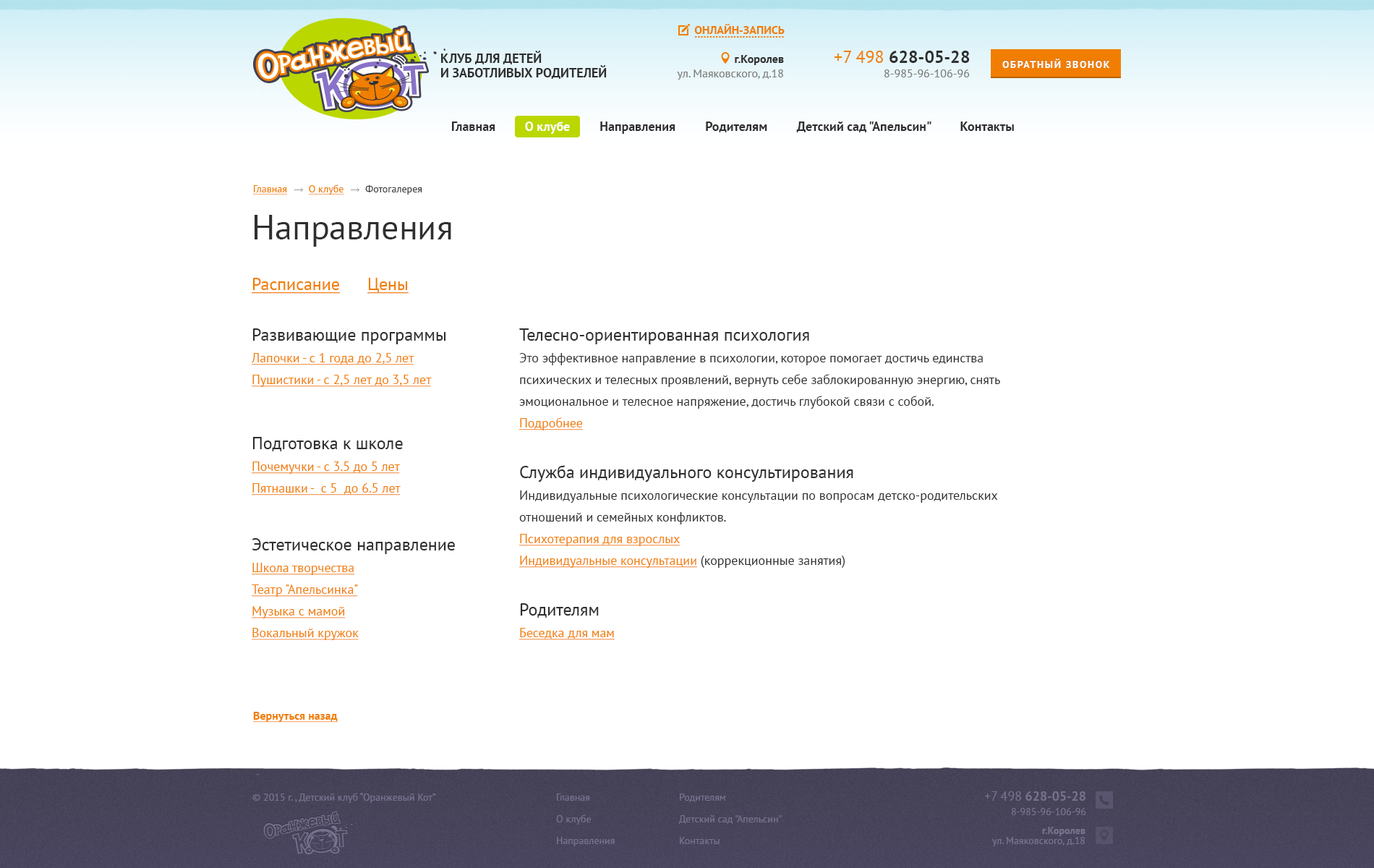
<style>
.page{position:relative;width:1374px;height:868px;background:#ffffff}
.page>*{position:absolute;margin:0}
.t1{font:11.6px "PTSans-Bold";color:#f17e00;text-transform:uppercase}
.t2{font:13px/14.5px "PTSans-Bold";color:#2f2f30}
.t3{font:17.4px "PTSans-Bold";color:#2f2f30}
.t4{font:17.4px "PTSans-Regular";color:#f17e00}
.t5{font:11.6px/14.5px "PTSans-Regular";color:#7e7e7e}
.t6{font:11.6px/14.5px "PTSans-Bold";color:#2f2f30}
.t7{font:10.1px "PTSans-Bold";letter-spacing:0.12em;text-transform:uppercase}
.t8{font:10.1px "PTSans-Bold";letter-spacing:0.12em;color:#fefbf9;text-transform:uppercase}
.t9{font:11.6px "PTSans-Regular";color:#7e7e7e}
.t10{font:13px "PTSans-Bold";color:#2f2f30}
.t11{font:13px "PTSans-Bold";color:#ffffff}
.t12{font:10.1px "PTSans-Regular";color:#f17e00;text-decoration:underline}
.t13{font:10.1px "PTSans-Regular";color:#3f3f3f}
.t14{font:34.7px "PTSans-Regular";color:#2f2f30}
.t15{font:17.4px "PTSans-Regular";color:#f17e00;text-decoration:underline}
.t16{font:17.4px "PTSans-Regular";color:#2f2f30}
.t17{font:13px/21.7px "PTSans-Regular";color:#f17e00;text-decoration:underline}
.t18{font:13px/21.7px "PTSans-Regular";color:#2f2f30}
.t19{font:13px "PTSans-Regular";color:#f17e00;text-decoration:underline}
.t20{font:11.6px "PTSans-Bold";color:#f17e00;text-decoration:underline}
.t21{font:10.1px "PTSans-Regular";color:#78728e}
.t22{font:10.1px/21.7px "PTSans-Regular";color:#78728e}
.t23{font:13px "PTSans-Bold";color:#78728e}
.t24{font:13px "PTSans-Regular";color:#78728e}
.t25{font:10.1px/10.1px "PTSans-Regular";color:#78728e}
.t26{font:10.1px/10.1px "PTSans-Bold";color:#78728e}
</style>
<div class="page">
<p class="t1" style="left:694px;top:24px;width:91px;height:10px">онлайн-запись</p>
<p class="t1" style="left:694px;top:36px;width:90px;height:2px">..............................</p>
<p class="t2" style="left:441px;top:51px;width:166px;height:28px">КЛУБ ДЛЯ ДЕТЕЙ<br>И ЗАБОТЛИВЫХ РОДИТЕЛЕЙ</p>
<p class="t3" style="left:834px;top:51px;width:136px;height:12px"><span class="t4">+7 498</span> 628-05-28</p>
<p class="t5" style="left:677px;top:55px;width:107px;height:25px;text-align:right"><span class="t6">г.Королев<br></span>ул. Маяковского, д.18</p>
<p class="t7" style="left:1002px;top:58px;width:108px;height:9px">Обратный звонок</p>
<p class="t8" style="left:1002px;top:59px;width:108px;height:9px">Обратный звонок</p>
<p class="t9" style="left:884px;top:69px;width:86px;height:8px">8-985-96-106-96</p>
<p class="t10" style="left:452px;top:121px;width:562px;height:13px">Главная         <span class="t11">О клубе</span>         Направления         Родителям         Детский сад "Апельсин"         Контакты</p>
<p class="t12" style="left:253px;top:184px;width:169px;height:11px">Главная        О клубе<span class="t13">        Фотогалерея</span></p>
<p class="t14" style="left:255px;top:215px;width:196px;height:32px">Направления</p>
<p class="t15" style="left:252px;top:278px;width:88px;height:16px">Расписание</p>
<p class="t15" style="left:367px;top:278px;width:42px;height:16px">Цены</p>
<p class="t16" style="left:252px;top:328px;width:194px;height:16px">Развивающие программы</p>
<p class="t16" style="left:519px;top:328px;width:290px;height:16px">Телесно-ориентированная психология</p>
<p class="t17" style="left:252px;top:353px;width:180px;height:34px">Лапочки - с 1 года до 2,5 лет<br>Пушистики - с 2,5 лет до 3,5 лет</p>
<p class="t18" style="left:519px;top:353px;width:481px;height:56px">Это эффективное направление в психологии, которое помогает достичь единства психических и телесных проявлений, вернуть себе заблокированную энергию, снять эмоциональное и телесное напряжение, достичь глубокой связи с собой.</p>
<p class="t19" style="left:519px;top:417px;width:64px;height:13px">Подробнее</p>
<p class="t16" style="left:252px;top:437px;width:151px;height:14px">Подготовка к школе</p>
<p class="t17" style="left:252px;top:461px;width:149px;height:34px">Почемучки - с 3.5 до 5 лет<br>Пятнашки -  с 5  до 6.5 лет</p>
<p class="t16" style="left:520px;top:465px;width:333px;height:17px">Служба индивидуального консультирования</p>
<p class="t18" style="left:519px;top:490px;width:479px;height:34px">Индивидуальные психологические консультации по вопросам детско-родительских отношений и семейных конфликтов.</p>
<p class="t17" style="left:519px;top:534px;width:326px;height:34px">Психотерапия для взрослых<br>Индивидуальные консультации<span class="t18"> (коррекционные занятия)</span></p>
<p class="t16" style="left:252px;top:538px;width:203px;height:16px">Эстетическое направление</p>
<p class="t17" style="left:252px;top:563px;width:107px;height:77px">Школа творчества<br>Театр "Апельсинка"<br>Музыка с мамой<br>Вокальный кружок</p>
<p class="t16" style="left:520px;top:603px;width:79px;height:15px">Родителям</p>
<p class="t19" style="left:519px;top:628px;width:96px;height:12px">Беседка для мам</p>
<p class="t20" style="left:253px;top:712px;width:85px;height:10px">Вернуться назад</p>
<p class="t21" style="left:252px;top:793px;width:184px;height:10px">© 2015 г. , Детский клуб “Оранжевый Кот”</p>
<p class="t22" style="left:556px;top:793px;width:59px;height:53px">Главная         <br>О клубе         <br>Направления</p>
<p class="t22" style="left:679px;top:793px;width:103px;height:51px">Родителям         <br>Детский сад "Апельсин"         <br>Контакты</p>
<p class="t23" style="left:984px;top:791px;width:102px;height:10px"><span class="t24">+7 498</span> 628-05-28</p>
<p class="t21" style="left:1011px;top:808px;width:75px;height:7px">8-985-96-106-96</p>
<p class="t25" style="left:992px;top:827px;width:94px;height:19px;text-align:right"><span class="t26">г.Королев<br></span>ул. Маяковского, д.18</p>
</div>
